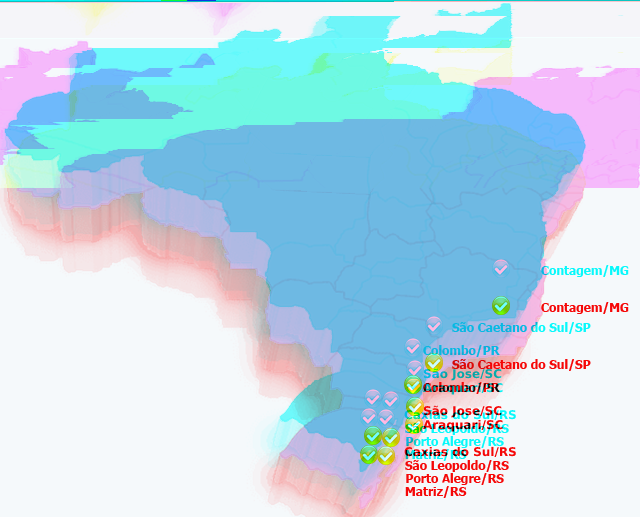
<style>
.page{position:relative;width:640px;height:517px;background:#f5f9fb}
.page>*{position:absolute;margin:0}
.t1{font:12px "Tahoma-Bold"}
</style>
<div class="page">
<p class="t1" style="left:541px;top:264px;width:88px;height:12px">Contagem/MG</p>
<p class="t1" style="left:452px;top:321px;width:139px;height:12px">São Caetano do Sul/SP</p>
<p class="t1" style="left:423px;top:344px;width:77px;height:12px">Colombo/PR</p>
<p class="t1" style="left:423px;top:367px;width:79px;height:13px">São Jose/SC</p>
<p class="t1" style="left:423px;top:381px;width:80px;height:13px">Araquari/SC</p>
<p class="t1" style="left:404px;top:408px;width:112px;height:12px">Caxias do Sul/RS</p>
<p class="t1" style="left:405px;top:422px;width:104px;height:12px">São Leopoldo/RS</p>
<p class="t1" style="left:406px;top:435px;width:98px;height:12px">Porto Alegre/RS</p>
<p class="t1" style="left:405px;top:448px;width:62px;height:12px">Matriz/RS</p>
</div>
